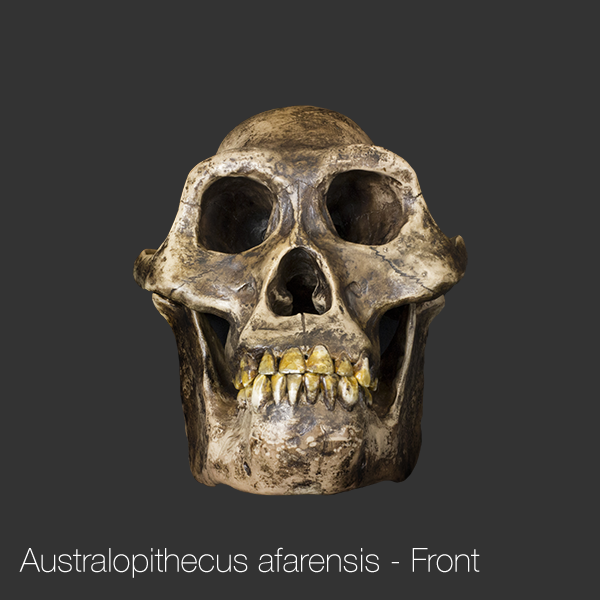
<style>
.page{position:relative;width:600px;height:600px;background:#333333}
.page>*{position:absolute;margin:0}
.t1{font:33.3px "HelveticaNeue-Thin";color:#ffffff}
</style>
<div class="page">
<p class="t1" style="left:19px;top:547px;width:461px;height:31px">Australopithecus afarensis - Front</p>
</div>
